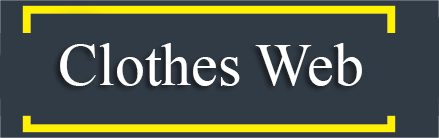
<style>
.page{position:relative;width:439px;height:138px;background:#313b45}
.page>*{position:absolute;margin:0}
.t1{font:60px "TimesNewRomanPSMT";color:#ffffff}
</style>
<div class="page">
<p class="t1" style="left:60px;top:43px;width:302px;height:43px">Clothes Web</p>
</div>
